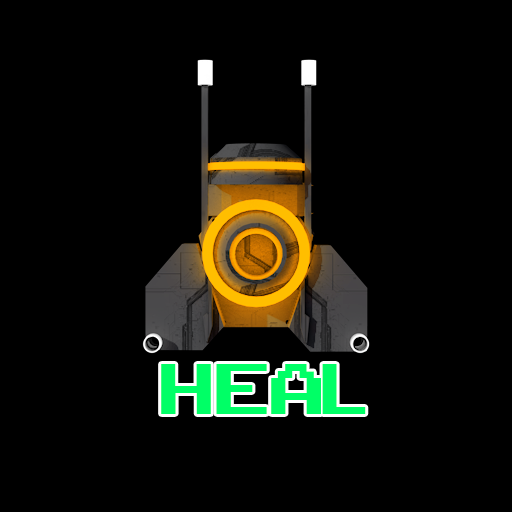
<style>
.page{position:relative;width:512px;height:512px;background:#000000}
.page>*{position:absolute;margin:0}
.t1{font:100px "ArcadeClassic";color:#00ff66}
</style>
<div class="page">
<p class="t1" style="left:161px;top:364px;width:205px;height:50px">Heal</p>
</div>
